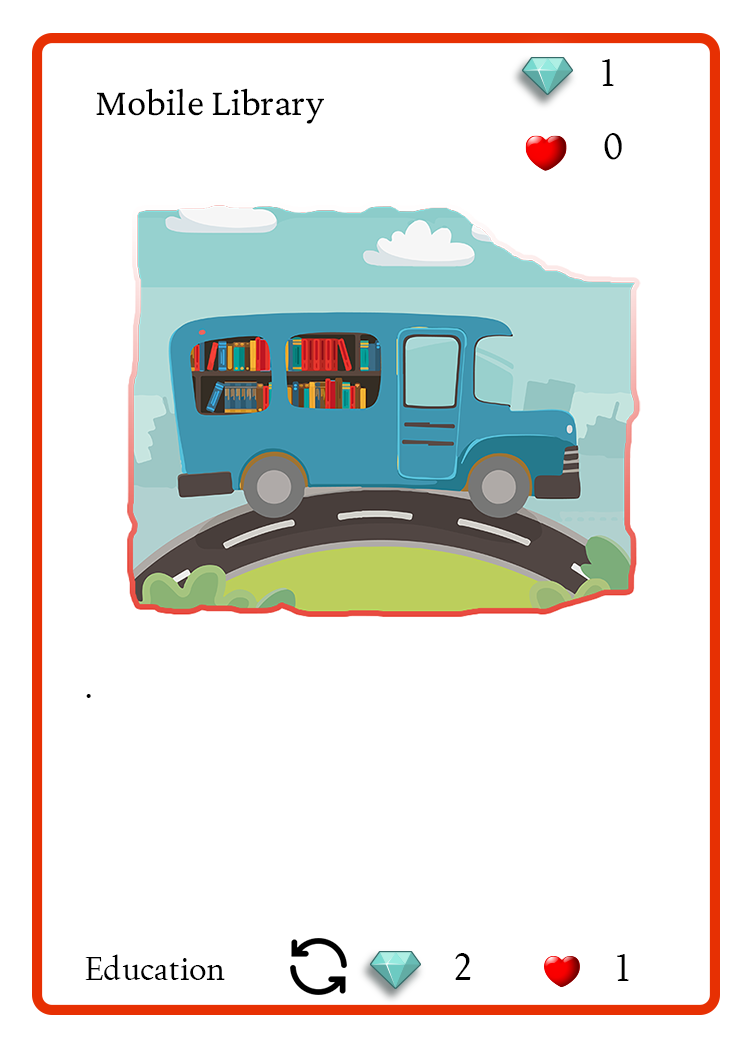
<style>
.page{position:relative;width:750px;height:1050px;background:#ffffff}
.page>*{position:absolute;margin:0}
.t1{font:37.5px "Joan-Regular";color:#000000;text-transform:uppercase}
.t2{font:38.9px "CrimsonPro-Regular";color:#000000}
.t3{font:33.3px "Joan-Regular";color:#000000}
</style>
<div class="page">
<p class="t1" style="left:602px;top:59px;width:12px;height:27px">1</p>
<p class="t2" style="left:96px;top:88px;width:228px;height:36px">Mobile Library</p>
<p class="t1" style="left:604px;top:133px;width:18px;height:27px">0</p>
<p class="t3" style="left:86px;top:694px;width:5px;height:4px">.</p>
<p class="t1" style="left:455px;top:953px;width:16px;height:27px">2</p>
<p class="t3" style="left:85px;top:954px;width:140px;height:26px">Education</p>
<p class="t1" style="left:617px;top:954px;width:12px;height:27px">1</p>
</div>
